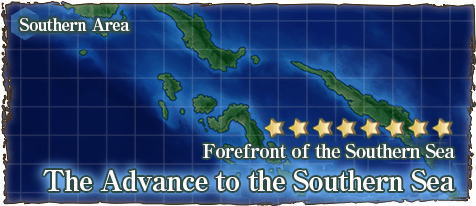
<style>
.page{position:relative;width:476px;height:206px}
.page>*{position:absolute;margin:0}
.t1{font:17px "RyuminPro-ExBold";letter-spacing:-0.04em;color:#ffffff}
.t2{font:19px "RyuminPro-ExBold";letter-spacing:-0.04em;color:#ffffff}
.t3{font:28px "RyuminPro-ExBold";letter-spacing:-0.04em;color:#ffffff}
</style>
<div class="page">
<p class="t1" style="left:19px;top:18px;width:111px;height:13px">Southern Area</p>
<p class="t2" style="left:203px;top:143px;width:252px;height:15px">Forefront of the Southern Sea</p>
<p class="t3" style="left:43px;top:170px;width:412px;height:21px">The Advance to the Southern Sea</p>
</div>
